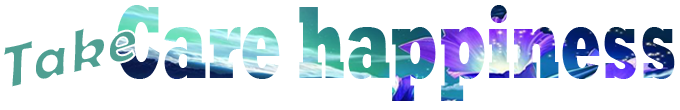
<style>
.page{position:relative;width:680px;height:110px;background:#ffffff}
.page>*{position:absolute;margin:0}
.t1{font:105.4px "Rockwell-ExtraBold";scale:0.57 1}
.t2{font:64.7px "BerlinSansFBDemi-Bold"}
</style>
<div class="page">
<p class="t1" style="left:116px;top:5px;width:559px;height:96px">Care happiness</p>
<p class="t2" style="left:1px;top:26px;width:136px;height:63px;rotate:-13deg">Take</p>
</div>
